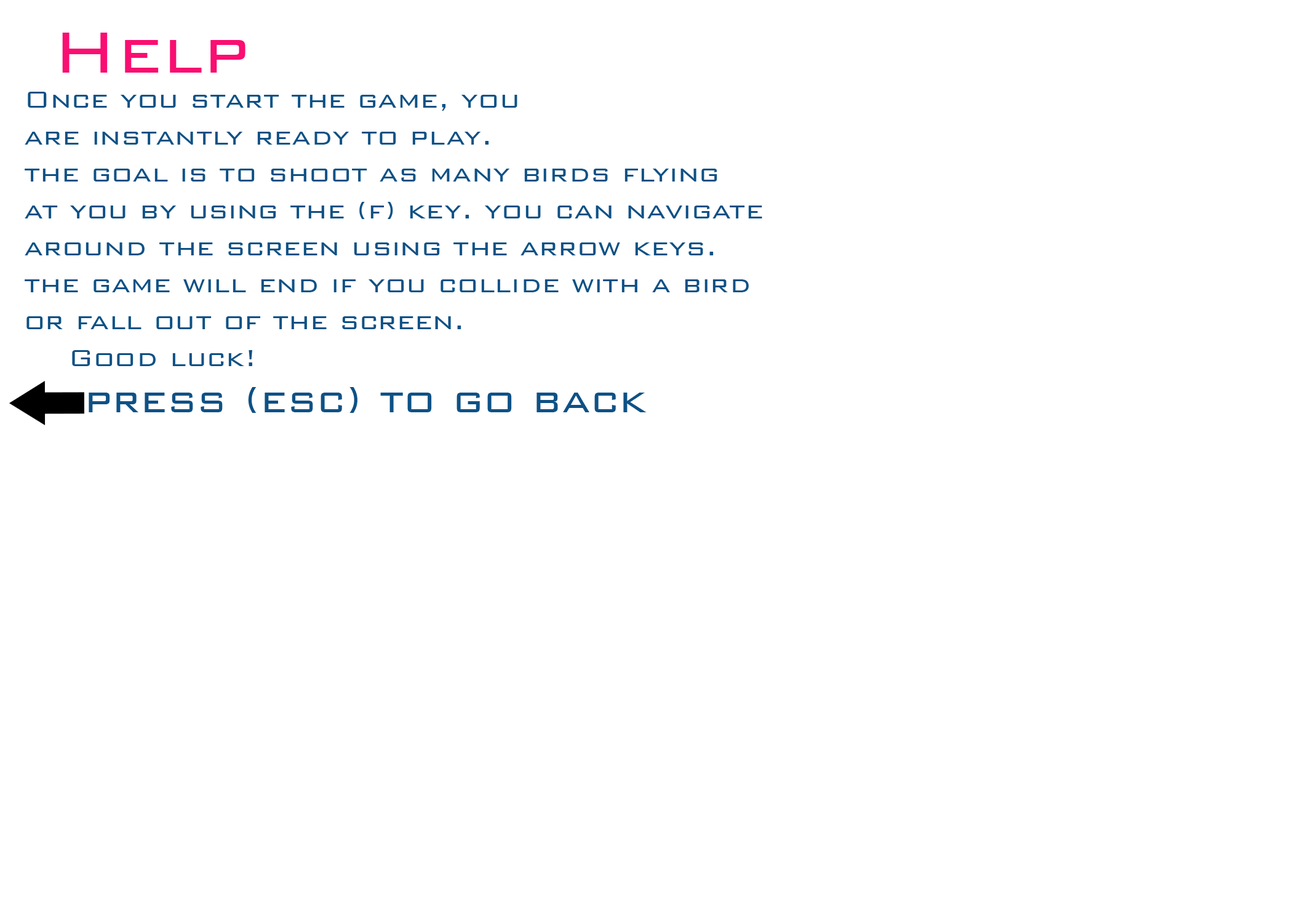
<style>
.page{position:relative;width:1292px;height:923px;background:#ffffff}
.page>*{position:absolute;margin:0}
.t1{font:76.9px "BankGothicBT-Light";color:#f90e71}
.t2{font:30.8px "BankGothicBT-Light";color:#0e5185}
.t3{font:46.1px "BankGothicBT-Light";color:#0e5185}
</style>
<div class="page">
<p class="t1" style="left:62px;top:33px;width:183px;height:40px">Help</p>
<p class="t2" style="left:25px;top:92px;width:737px;height:274px">Once you start the game, you<br>are instantly ready to play.<br>the goal is to shoot as many birds flying <br>at you by using the (f) key. you can navigate <br>around the screen using the arrow keys.<br>the game will end if you collide with a bird<br>or fall out of the screen.<br>  Good luck!</p>
<p class="t3" style="left:89px;top:387px;width:558px;height:26px">press (esc) to go back</p>
</div>
